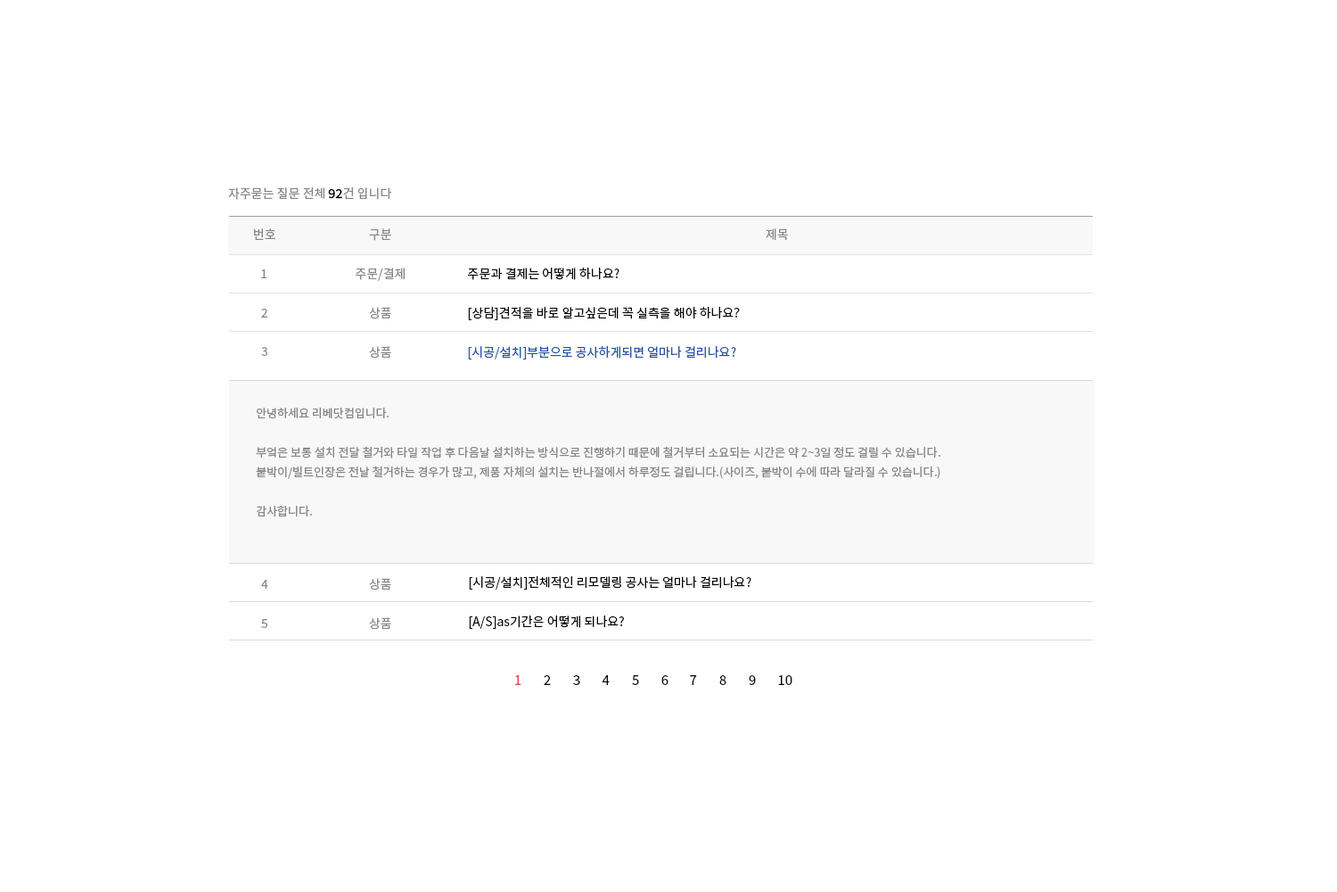
<style>
.page{position:relative;width:1337px;height:892px;background:#ffffff}
.page>*{position:absolute;margin:0}
.t1{font:12.5px "NotoSansKR-Regular";color:#878787}
.t2{font:12.5px "NotoSansKR-Regular";color:#070707;font-weight:bold}
.t3{font:12.5px "NotoSansKR-Regular";color:#070707}
.t4{font:12.5px "NotoSansKR-Regular";color:#2352a4}
.t5{font:11.6px/19.6px "NotoSansKR-Regular";color:#878787}
.t6{font:13.4px "NotoSansKR-Regular";color:#dd4b39}
.t7{font:13.4px "NotoSansKR-Regular";color:#070707}
</style>
<div class="page">
<p class="t1" style="left:228px;top:187px;width:164px;height:13px">자주묻는 질문 전체 <span class="t2">92</span>건 입니다</p>
<p class="t1" style="left:254px;top:228px;width:22px;height:12px">번호</p>
<p class="t1" style="left:369px;top:228px;width:22px;height:13px">구분</p>
<p class="t1" style="left:766px;top:228px;width:22px;height:13px">제목</p>
<p class="t1" style="left:261px;top:269px;width:6px;height:9px">1</p>
<p class="t1" style="left:356px;top:267px;width:49px;height:14px">주문/결제</p>
<p class="t3" style="left:468px;top:267px;width:152px;height:13px">주문과 결제는 어떻게 하나요?</p>
<p class="t1" style="left:261px;top:308px;width:6px;height:9px">2</p>
<p class="t1" style="left:369px;top:307px;width:22px;height:12px">상품</p>
<p class="t3" style="left:468px;top:307px;width:272px;height:13px">[상담]견적을 바로 알고싶은데 꼭 실측을 해야 하나요?</p>
<p class="t1" style="left:261px;top:347px;width:6px;height:9px">3</p>
<p class="t1" style="left:369px;top:346px;width:22px;height:12px">상품</p>
<p class="t4" style="left:468px;top:346px;width:268px;height:13px">[시공/설치]부분으로 공사하게되면 얼마나 걸리나요?</p>
<p class="t5" style="left:256px;top:407px;width:685px;height:109px">안녕하세요 리베닷컴입니다.<br><br>부엌은 보통 설치 전달 철거와 타일 작업 후 다음날 설치하는 방식으로 진행하기 때문에 철거부터 소요되는 시간은 약 2~3일 정도 걸릴 수 있습니다.<br>붙박이/빌트인장은 전날 철거하는 경우가 많고, 제품 자체의 설치는 반나절에서 하루정도 걸립니다.(사이즈, 붙박이 수에 따라 달라질 수 있습니다.)<br><br>감사합니다.</p>
<p class="t1" style="left:261px;top:580px;width:7px;height:8px">4</p>
<p class="t1" style="left:369px;top:578px;width:22px;height:12px">상품</p>
<p class="t3" style="left:469px;top:576px;width:283px;height:13px">[시공/설치]전체적인 리모델링 공사는 얼마나 걸리나요?</p>
<p class="t1" style="left:369px;top:617px;width:22px;height:12px">상품</p>
<p class="t3" style="left:469px;top:615px;width:155px;height:14px">[A/S]as기간은 어떻게 되나요?</p>
<p class="t1" style="left:261px;top:619px;width:6px;height:9px">5</p>
<p class="t6" style="left:515px;top:675px;width:7px;height:10px">1</p>
<p class="t7" style="left:544px;top:675px;width:7px;height:10px">2</p>
<p class="t7" style="left:573px;top:675px;width:7px;height:10px">3</p>
<p class="t7" style="left:602px;top:675px;width:8px;height:10px">4</p>
<p class="t7" style="left:632px;top:675px;width:7px;height:10px">5</p>
<p class="t7" style="left:662px;top:675px;width:7px;height:10px">6</p>
<p class="t7" style="left:690px;top:675px;width:7px;height:10px">7</p>
<p class="t7" style="left:720px;top:675px;width:7px;height:10px">8</p>
<p class="t7" style="left:749px;top:675px;width:7px;height:10px">9</p>
<p class="t7" style="left:778px;top:675px;width:15px;height:10px">10</p>
</div>
